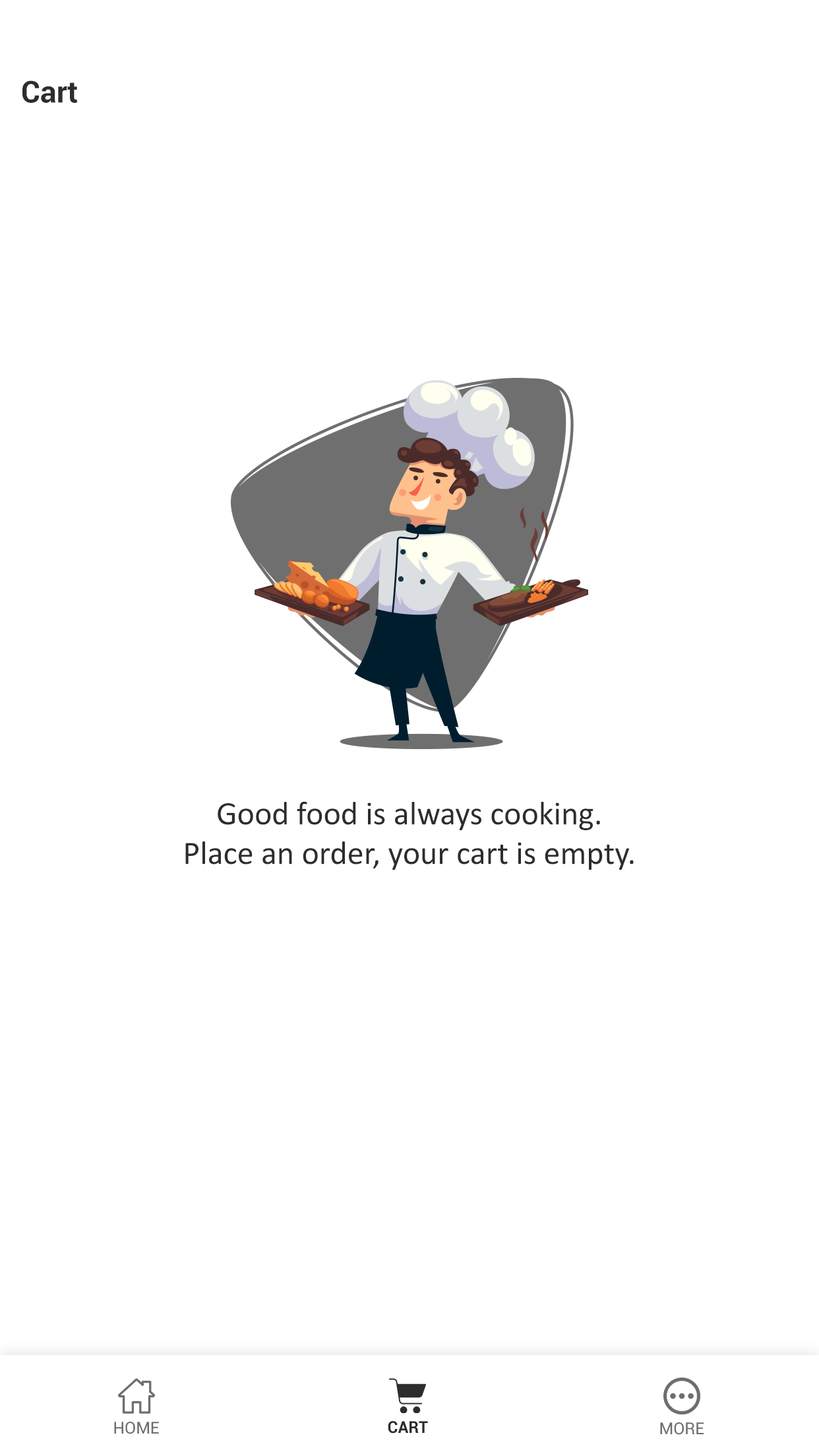
<style>
.page{position:relative;width:819px;height:1456px;background:#ffffff}
.page>*{position:absolute;margin:0}
.t1{font:30.2px "Roboto-Bold";color:#2d2d2d}
.t2{font:33px "Calibri";color:#2d2d2d}
.t3{font:16.5px "Roboto-Regular";color:#6e6e6e;text-transform:uppercase}
.t4{font:16.5px "Roboto-Bold";color:#2d2d2d;text-transform:uppercase}
</style>
<div class="page">
<p class="t1" style="left:22px;top:80px;width:55px;height:23px">Cart</p>
<p class="t2" style="left:185px;top:801px;width:449px;height:69px;text-align:center">Good food is always cooking.<br>Place an order, your cart is empty.</p>
<p class="t3" style="left:114px;top:1422px;width:45px;height:12px">Home</p>
<p class="t4" style="left:388px;top:1421px;width:40px;height:13px">Cart</p>
<p class="t3" style="left:660px;top:1422px;width:44px;height:13px">More</p>
</div>
